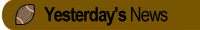
<style>
.page{position:relative;width:200px;height:30px;background:#785500}
.page>*{position:absolute;margin:0}
.t1{font:20px "ArialNarrow-Bold";letter-spacing:-0.04em;color:#000000}
.t2{font:20px "ArialNarrow";letter-spacing:-0.04em;color:#000000}
</style>
<div class="page">
<p class="t1" style="left:44px;top:7px;width:124px;height:19px">Yesterday's<span class="t2"> News</span></p>
</div>
